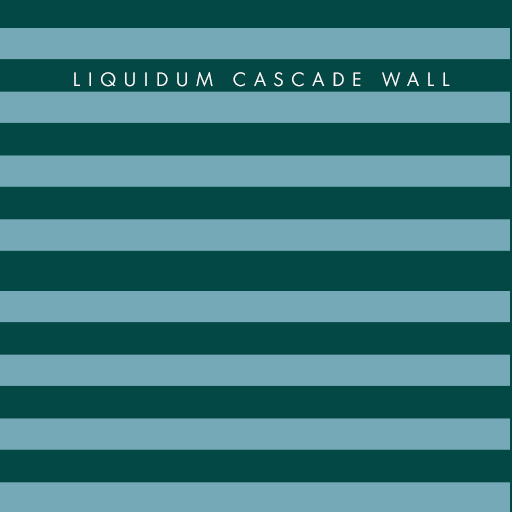
<style>
.page{position:relative;width:512px;height:512px;background:#75a9b7}
.page>*{position:absolute;margin:0}
.t1{font:18px "LuzSans-Book";letter-spacing:0.44em;color:#feffff}
</style>
<div class="page">
<p class="t1" style="left:74px;top:72px;width:376px;height:15px">LIQUIDUM CASCADE WALL</p>
</div>
